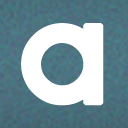
<style>
.page{position:relative;width:128px;height:128px;background:#ffffff}
.page>*{position:absolute;margin:0}
.t1{font:136.4px "BDP-Birgula";letter-spacing:-0.02em;color:#ffffff;font-weight:bold}
</style>
<div class="page">
<p class="t1" style="left:21px;top:23px;width:83px;height:83px">a</p>
</div>
